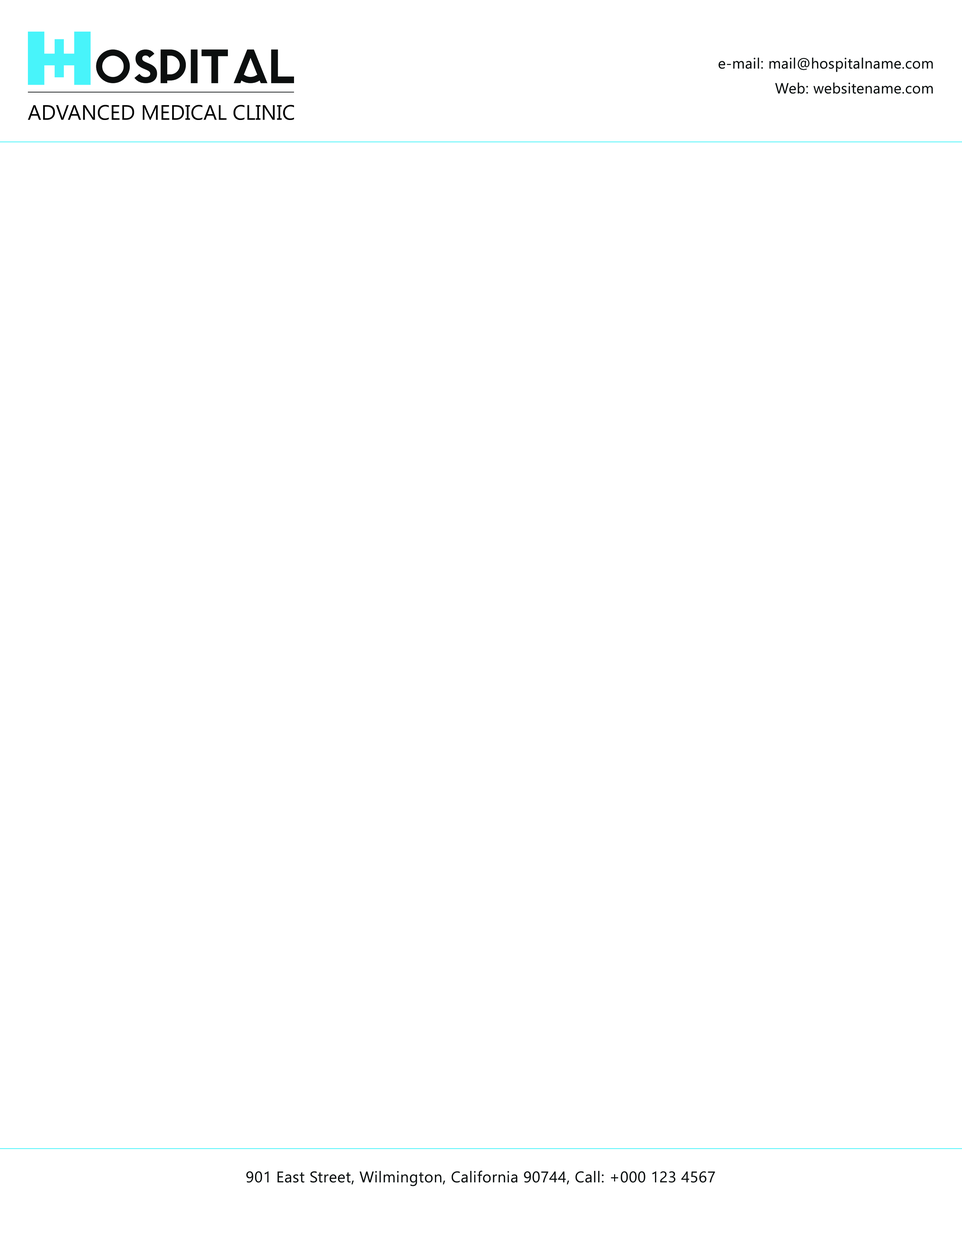
<style>
.page{position:relative;width:962px;height:1240px;background:#ffffff}
.page>*{position:absolute;margin:0}
.t1{font:14.6px/24.9px "SegoeUI";letter-spacing:0.02em;color:#0c0f0f}
.t2{font:15.4px "SegoeUI";letter-spacing:0.02em;color:#0c0f0f}
</style>
<div class="page">
<p class="t1" style="left:718px;top:58px;width:215px;height:36px;text-align:right">e-mail: mail@hospitalname.com<br>Web: websitename.com</p>
<p class="t2" style="left:246px;top:1171px;width:469px;height:15px">901 East Street, Wilmington, California 90744, Call: +000 123 4567</p>
</div>
